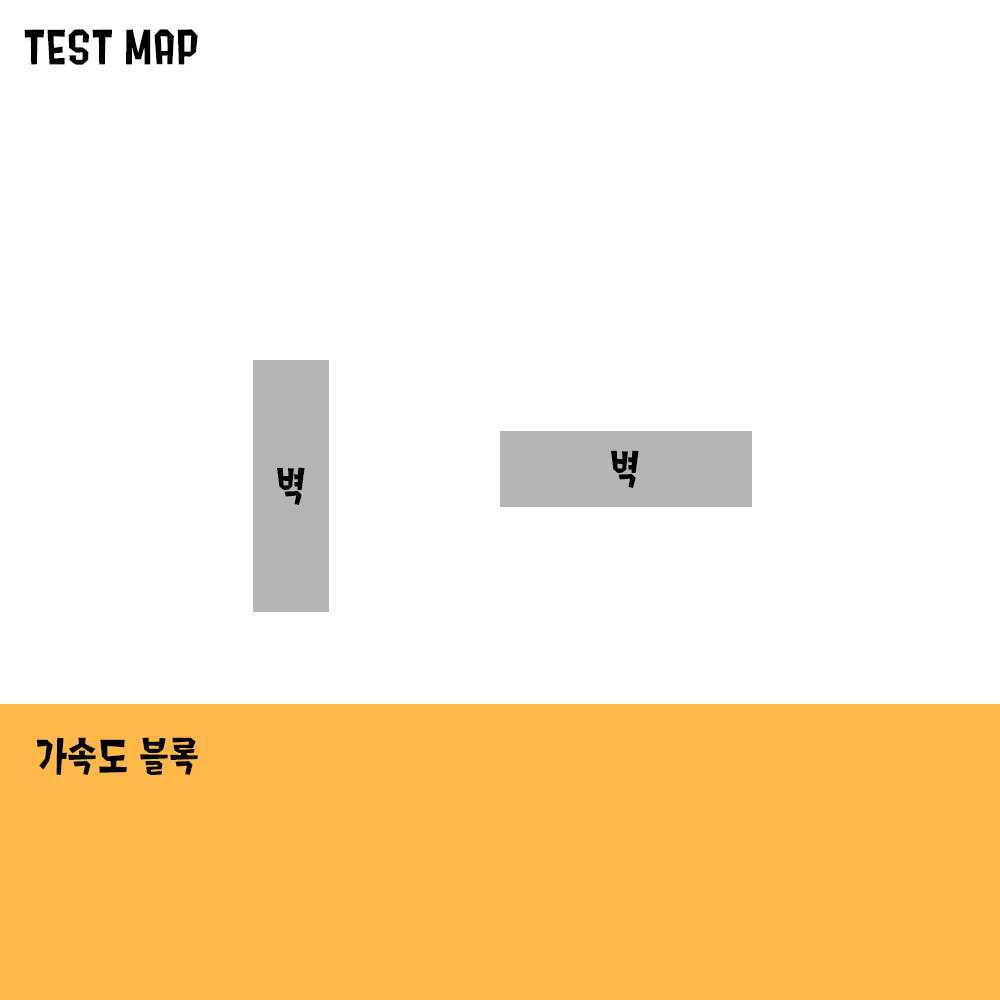
<style>
.page{position:relative;width:1000px;height:1000px;background:#ffffff}
.page>*{position:absolute;margin:0}
.t1{font:48px "Splat2K";letter-spacing:0.01em;color:#000000}
</style>
<div class="page">
<p class="t1" style="left:24px;top:29px;width:174px;height:36px">TEST MAP</p>
<p class="t1" style="left:37px;top:737px;width:161px;height:38px">가속도 블록</p>
</div>
